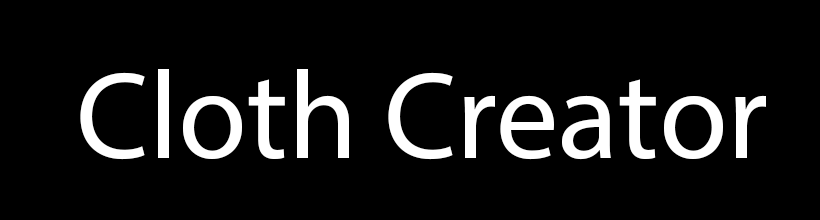
<style>
.page{position:relative;width:820px;height:220px;background:#000000}
.page>*{position:absolute;margin:0}
.t1{font:125px "MyriadPro-Regular";color:#ffffff}
</style>
<div class="page">
<p class="t1" style="left:80px;top:69px;width:686px;height:91px">Cloth Creator</p>
</div>
